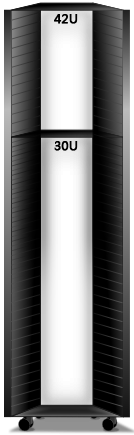
<style>
.page{position:relative;width:134px;height:435px}
.page>*{position:absolute;margin:0}
.t1{font:12px "MicrosoftYaHei";color:#000000;font-weight:bold}
</style>
<div class="page">
<p class="t1" style="left:54px;top:14px;width:24px;height:10px">42U</p>
<p class="t1" style="left:54px;top:141px;width:24px;height:10px">30U</p>
</div>
